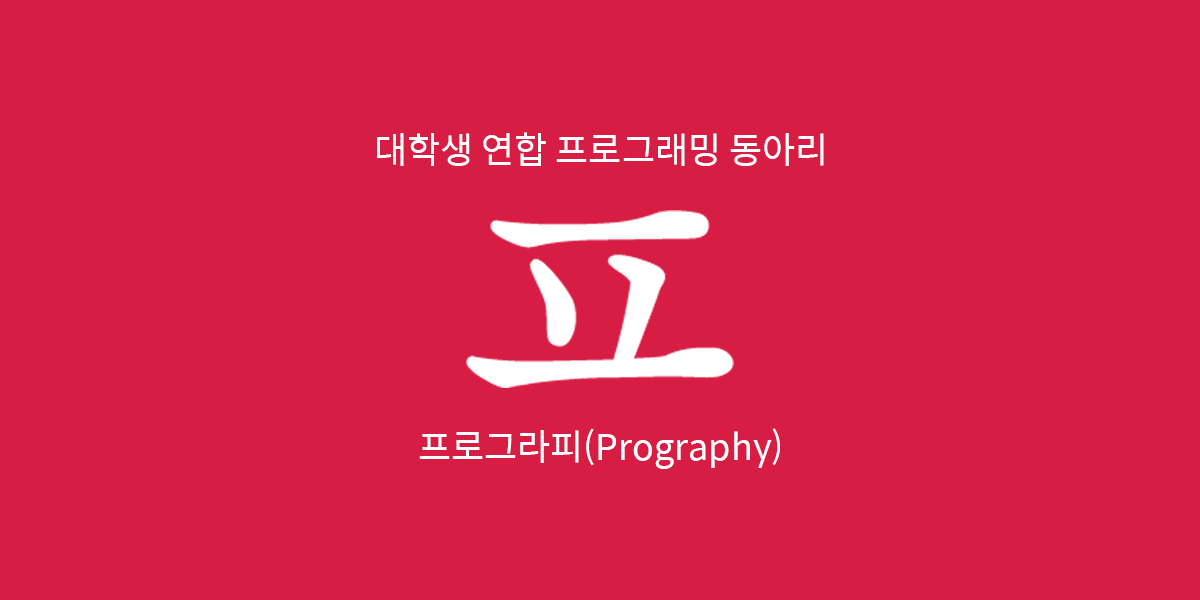
<style>
.page{position:relative;width:1200px;height:600px;background:#d81d45}
.page>*{position:absolute;margin:0}
.t1{font:36px "SpoqaHanSans-Regular";color:#ffffff}
</style>
<div class="page">
<p class="t1" style="left:377px;top:132px;width:447px;height:34px">대학생 연합 프로그래밍 동아리</p>
<p class="t1" style="left:419px;top:428px;width:361px;height:41px">프로그라피(Prography)</p>
</div>
